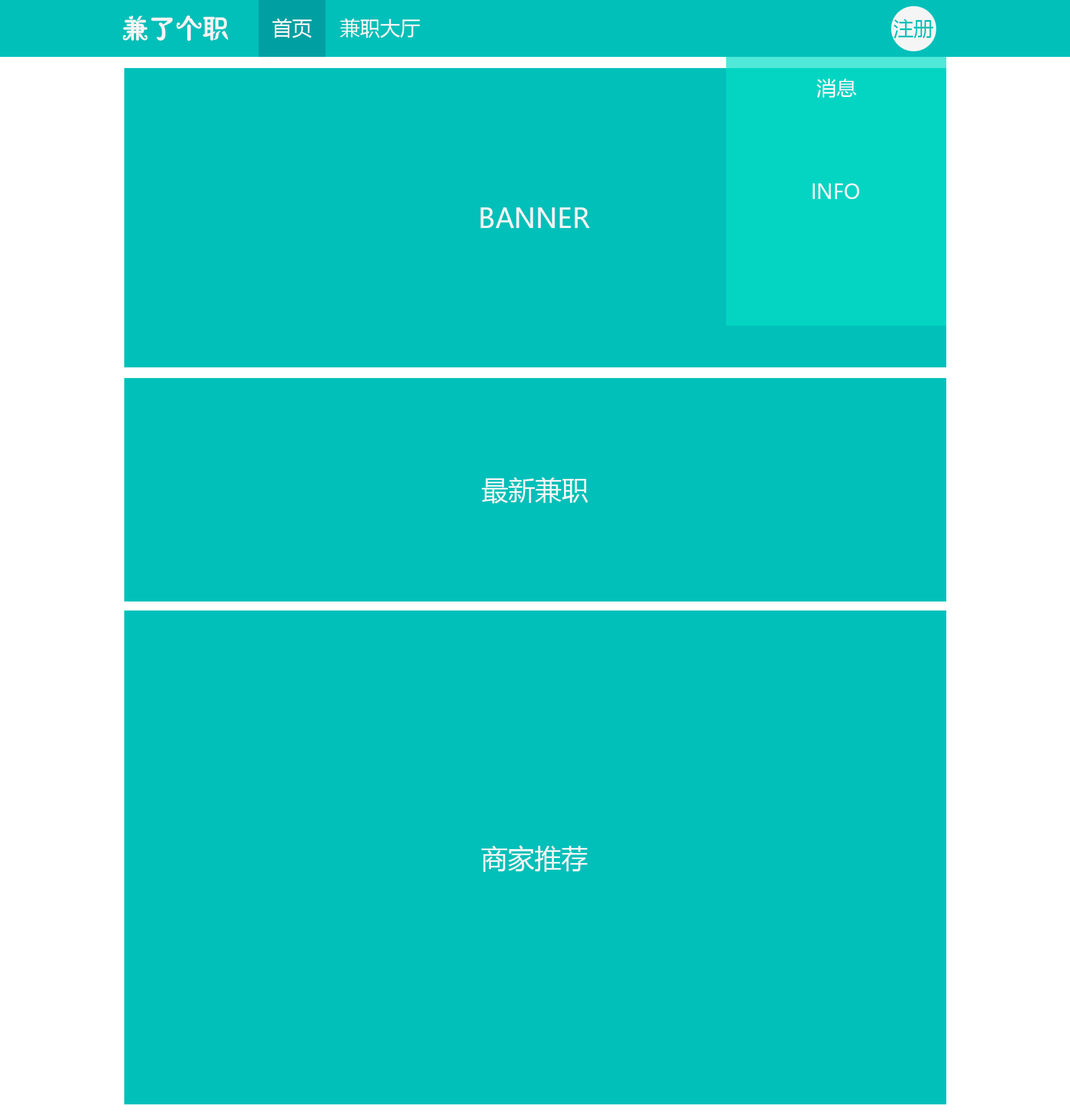
<style>
.page{position:relative;width:1070px;height:1115px;background:#00c0b9}
.page>*{position:absolute;margin:0}
.t1{font:26.7px "JXiuYing";color:#f5f5f5}
.t2{font:20.1px "MicrosoftYaHei";color:#f5f5f5}
.t3{font:20.1px "MicrosoftYaHei";color:#00c0b9}
.t4{font:26.7px "MicrosoftYaHei";color:#f5f5f5}
</style>
<div class="page">
<p class="t1" style="left:123px;top:15px;width:105px;height:26px">兼了个职</p>
<p class="t2" style="left:272px;top:18px;width:40px;height:20px">首页</p>
<p class="t2" style="left:340px;top:18px;width:80px;height:20px">兼职大厅</p>
<p class="t3" style="left:893px;top:19px;width:40px;height:19px">注册</p>
<p class="t2" style="left:816px;top:79px;width:40px;height:19px">消息</p>
<p class="t2" style="left:812px;top:183px;width:47px;height:16px">INFO</p>
<p class="t4" style="left:480px;top:207px;width:110px;height:21px">BANNER</p>
<p class="t4" style="left:481px;top:477px;width:107px;height:26px">最新兼职</p>
<p class="t4" style="left:481px;top:845px;width:106px;height:27px">商家推荐</p>
</div>
